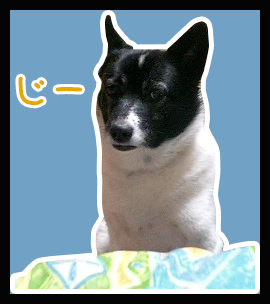
<style>
.page{position:relative;width:270px;height:304px;background:#71a1c5}
.page>*{position:absolute;margin:0}
.t1{font:52.9px "APJapanesefont";color:#e6a800}
</style>
<div class="page">
<p class="t1" style="left:18px;top:76px;width:64px;height:30px">じー</p>
</div>
